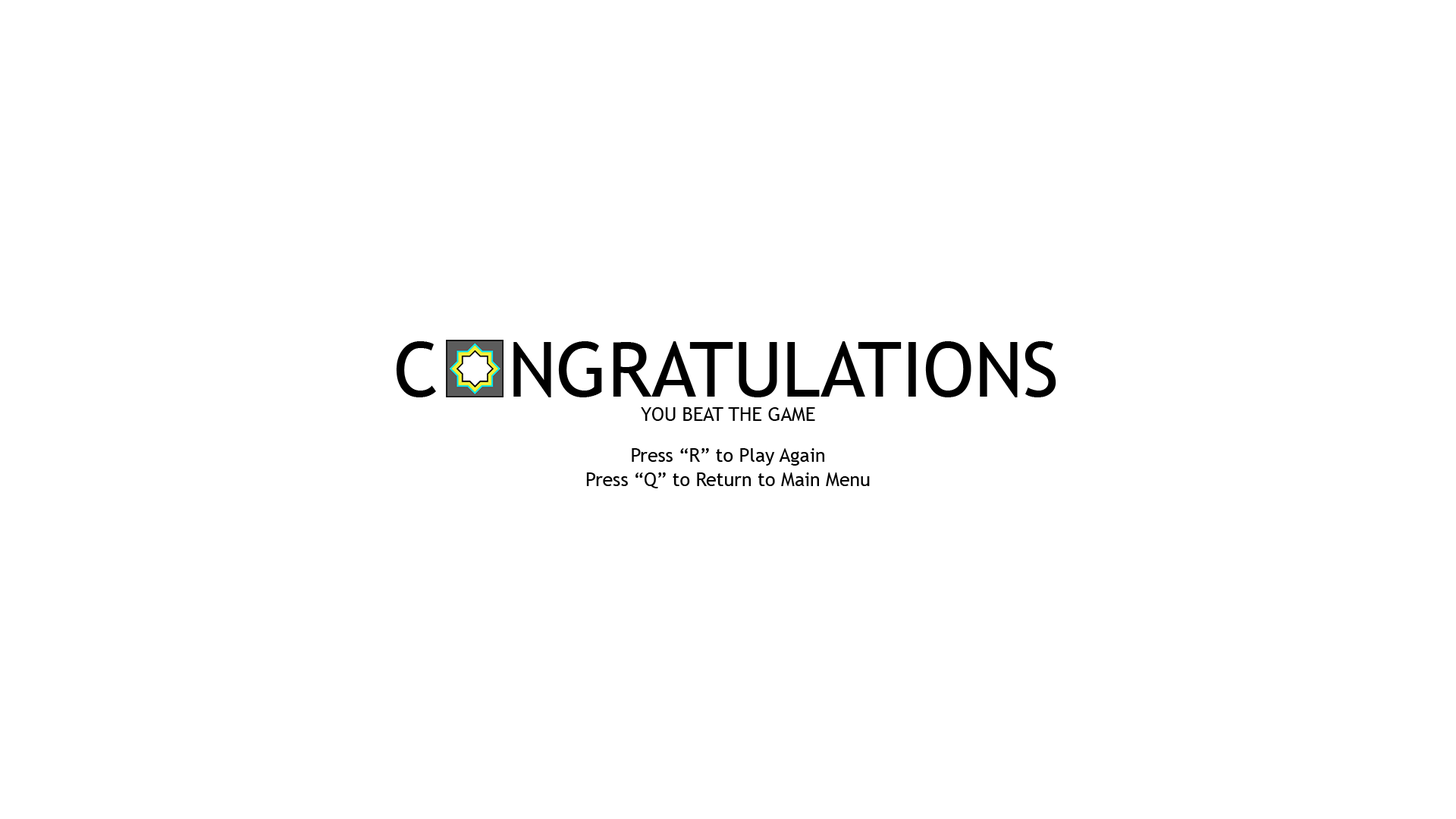
<style>
.page{position:relative;width:1456px;height:819px;background:#ffffff}
.page>*{position:absolute;margin:0}
.t1{font:75.8px "TrebuchetMS";color:#000000}
.t2{font:19px "TrebuchetMS";color:#000000}
</style>
<div class="page">
<p class="t1" style="left:396px;top:341px;width:660px;height:56px">C   NGRATULATIONS</p>
<p class="t2" style="left:641px;top:407px;width:174px;height:14px">YOU BEAT THE GAME</p>
<p class="t2" style="left:632px;top:448px;width:192px;height:18px">Press “R” to Play Again</p>
<p class="t2" style="left:586px;top:472px;width:284px;height:16px">Press “Q” to Return to Main Menu</p>
</div>
